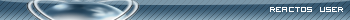
<style>
.page{position:relative;width:350px;height:20px}
.page>*{position:absolute;margin:0}
.t1{font:10px "Visitor -BRK-";letter-spacing:0.025em;color:#ffffff;font-variant:small-caps}
</style>
<div class="page">
<p class="t1" style="left:270px;top:7px;width:73px;height:5px">ReactOS user</p>
</div>
